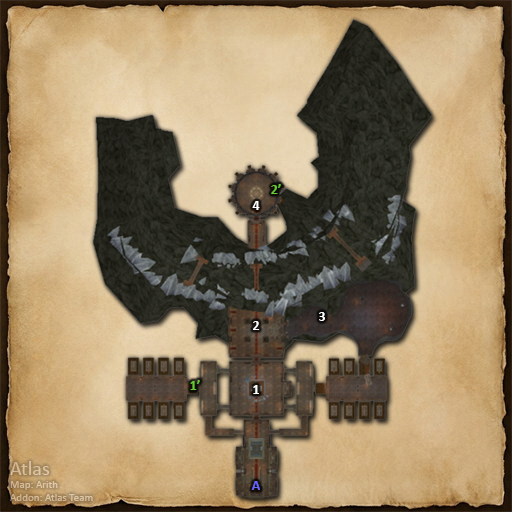
<style>
.page{position:relative;width:512px;height:512px}
.page>*{position:absolute;margin:0}
.t1{font:14px "Calibri-Bold";color:#66cc33}
.t2{font:14px "Calibri-Bold";color:#ffffff}
.t3{font:11px "Calibri";color:#d8c1a0}
.t4{font:20px "Calibri";color:#d8c1a0}
.t5{font:14px "Calibri-Bold";color:#6666ff}
</style>
<div class="page">
<p class="t1" style="left:271px;top:184px;width:10px;height:10px">2’</p>
<p class="t2" style="left:252px;top:201px;width:8px;height:9px">4</p>
<p class="t2" style="left:319px;top:312px;width:6px;height:9px">3</p>
<p class="t2" style="left:253px;top:321px;width:7px;height:9px">2</p>
<p class="t1" style="left:190px;top:380px;width:10px;height:10px">1’</p>
<p class="t2" style="left:253px;top:385px;width:6px;height:9px">1</p>
<p class="t3" style="left:10px;top:461px;width:83px;height:40px"><span class="t4">Atlas<br></span>Map: Arith<br>Addon: Atlas Team</p>
<p class="t5" style="left:251px;top:481px;width:9px;height:9px">A</p>
</div>
